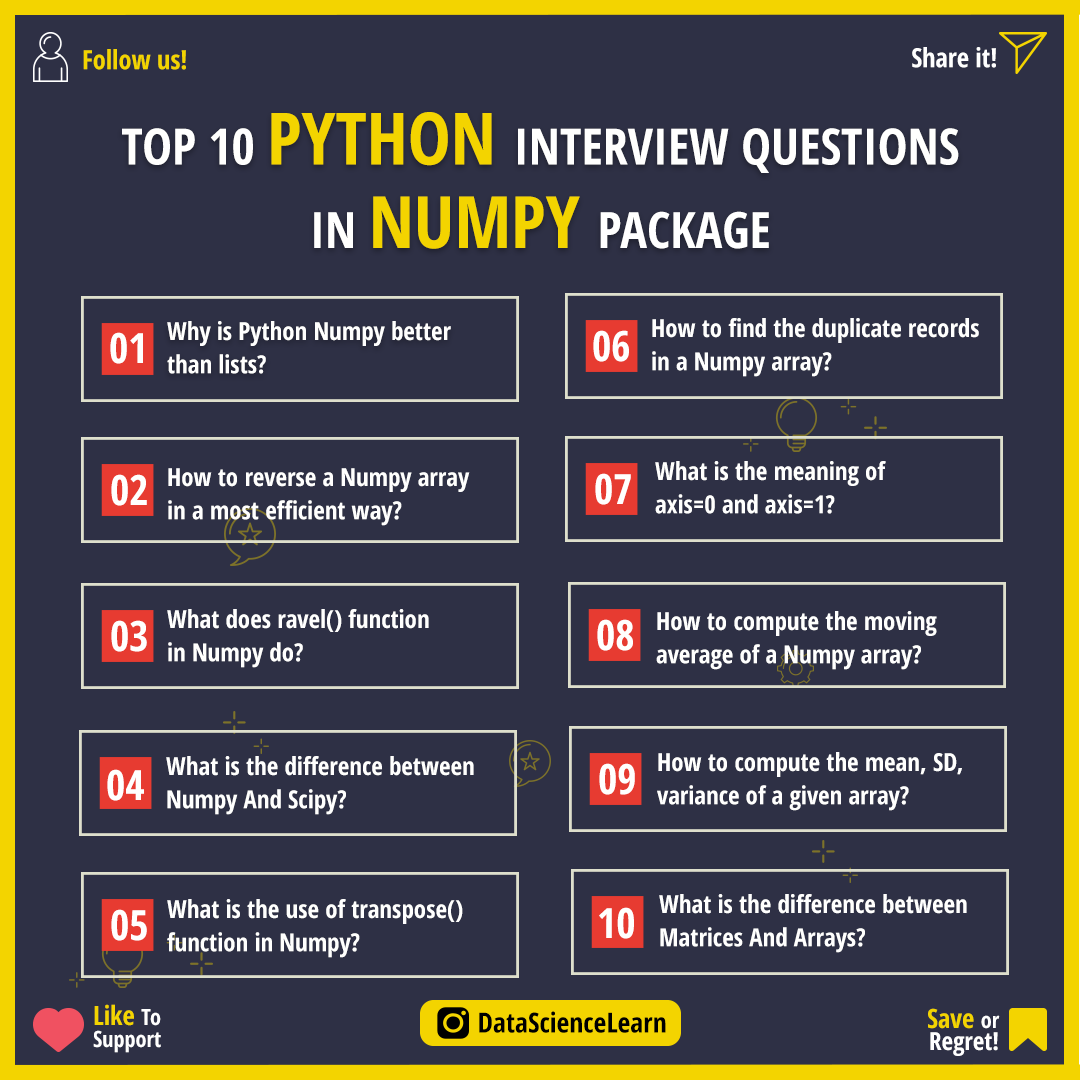
<style>
.page{position:relative;width:1080px;height:1080px;background:#2e3045}
.page>*{position:absolute;margin:0}
.t1{font:26.4px "OpenSans-CondensedBold";color:#f3d400}
.t2{font:26.4px "OpenSans-CondensedBold";color:#ffffff}
.t3{font:50px/72.2px "OpenSans-CondensedBold";color:#fffffe}
.t4{font:72.2px/72.2px "OpenSans-CondensedBold";color:#f3d400}
.t5{font:50px/83.3px "OpenSans-CondensedBold";color:#fffffe}
.t6{font:72.2px/83.3px "OpenSans-CondensedBold";color:#f3d400}
.t7{font:50px/83.3px "OpenSans-CondensedBold";color:#ffffff}
.t8{font:25px/33.3px "OpenSans-CondensedBold";color:#fffffe}
.t9{font:41.7px "OpenSans-CondensedBold";color:#fffffe}
.t10{font:22.2px/22.2px "OpenSans-CondensedBold";color:#ffffff}
.t11{font:26.4px/22.2px "OpenSans-CondensedBold";color:#f3d400}
.t12{font:27.8px "OpenSans-CondensedBold";color:#000000}
.t13{font:25px/22.2px "OpenSans-CondensedBold";color:#ffffff}
</style>
<div class="page">
<p class="t1" style="left:83px;top:49px;width:103px;height:21px">Follow us!</p>
<p class="t2" style="left:912px;top:47px;width:84px;height:21px">Share it!</p>
<p class="t3" style="left:122px;top:112px;width:837px;height:137px;text-align:center">TOP 10 <span class="t4">PYTHON </span>INTERVIEW QUESTIONS<br><span class="t5">IN </span><span class="t6">NUMPY </span><span class="t7">PACKAGE</span></p>
<p class="t8" style="left:652px;top:318px;width:327px;height:59px">How to find the duplicate records <br>in a Numpy array?</p>
<p class="t8" style="left:167px;top:321px;width:284px;height:53px">Why is Python Numpy better <br>than lists?</p>
<p class="t9" style="left:110px;top:332px;width:33px;height:32px">01</p>
<p class="t9" style="left:593px;top:330px;width:36px;height:32px">06</p>
<p class="t8" style="left:655px;top:461px;width:231px;height:53px">What is the meaning of <br>axis=0 and axis=1?</p>
<p class="t8" style="left:168px;top:468px;width:302px;height:58px">How to reverse a Numpy array <br>in a most efficient way?</p>
<p class="t9" style="left:595px;top:473px;width:36px;height:32px">07</p>
<p class="t9" style="left:111px;top:474px;width:36px;height:32px">02</p>
<p class="t8" style="left:167px;top:609px;width:262px;height:59px">What does ravel() function <br>in Numpy do?</p>
<p class="t8" style="left:656px;top:611px;width:281px;height:59px">How to compute the moving <br>average of a Numpy array?</p>
<p class="t9" style="left:111px;top:620px;width:36px;height:32px">03</p>
<p class="t9" style="left:597px;top:619px;width:36px;height:32px">08</p>
<p class="t8" style="left:166px;top:756px;width:308px;height:59px">What is the difference between <br>Numpy And Scipy?</p>
<p class="t8" style="left:657px;top:752px;width:305px;height:59px">How to compute the mean, SD,<br>variance of a given array?</p>
<p class="t9" style="left:107px;top:769px;width:37px;height:32px">04</p>
<p class="t9" style="left:599px;top:763px;width:36px;height:32px">09</p>
<p class="t8" style="left:659px;top:894px;width:308px;height:59px">What is the difference between <br>Matrices And Arrays?</p>
<p class="t8" style="left:167px;top:899px;width:296px;height:59px">What is the use of transpose() <br>function in Numpy?</p>
<p class="t9" style="left:111px;top:909px;width:36px;height:32px">05</p>
<p class="t9" style="left:599px;top:907px;width:35px;height:32px">10</p>
<p class="t10" style="left:93px;top:1004px;width:68px;height:49px"><span class="t11">Like </span>To<br>Support</p>
<p class="t12" style="left:479px;top:1011px;width:187px;height:22px">DataScienceLearn</p>
<p class="t13" style="left:928px;top:1008px;width:72px;height:48px;text-align:right"><span class="t11">Save </span><span class="t10">or<br></span>Regret!</p>
</div>
